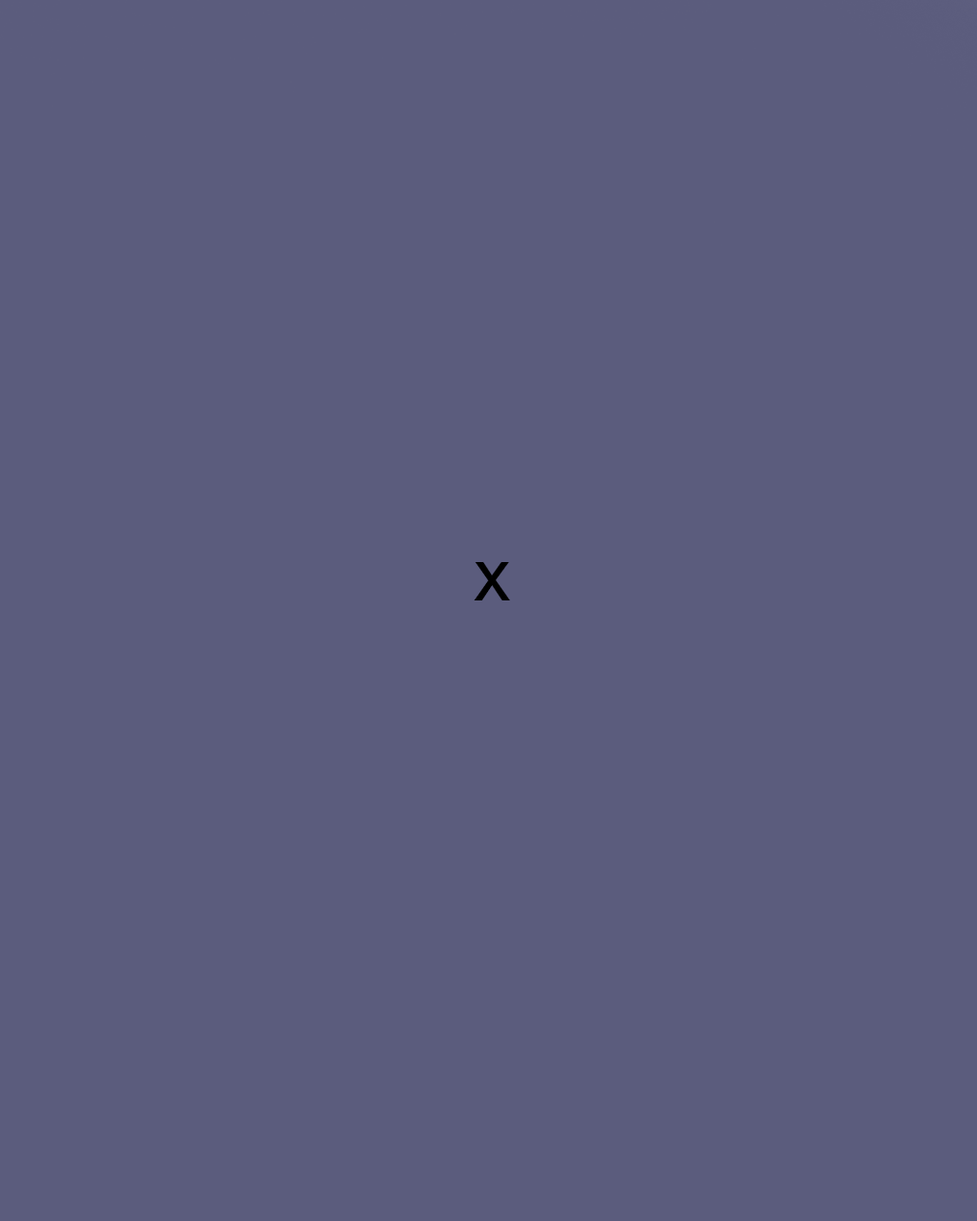
<style>
.page{position:relative;width:977px;height:1221px;background:#5b5c7d}
.page>*{position:absolute;margin:0}
.t1{font:75px "ArialNarrow";color:#000000;scale:1.2 1}
</style>
<div class="page">
<p class="t1" style="left:474px;top:562px;width:36px;height:38px">x</p>
</div>
